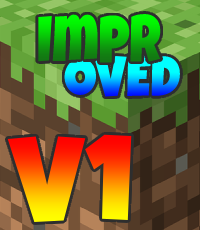
<style>
.page{position:relative;width:200px;height:230px}
.page>*{position:absolute;margin:0}
.t1{font:66.9px "LuckiestGuy-Regular";scale:0.77 1}
.t2{font:57.3px "LuckiestGuy-Regular";scale:0.89 1}
.t3{font:121px "LuckiestGuy-Regular"}
</style>
<div class="page">
<p class="t1" style="left:38px;top:14px;width:123px;height:49px">Impr</p>
<p class="t2" style="left:64px;top:55px;width:116px;height:42px">OVED</p>
<p class="t3" style="left:7px;top:134px;width:125px;height:89px">V1</p>
</div>
